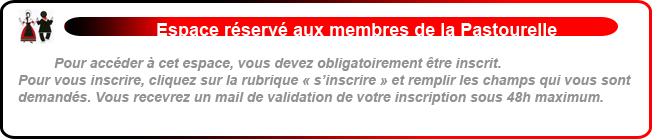
<style>
.page{position:relative;width:652px;height:139px;background:#ffffff}
.page>*{position:absolute;margin:0}
.t1{font:18px "Arial-BoldMT";color:#ffffff}
.t2{font:14px "Arial-BoldItalicMT";color:#929292}
.t3{font:11px "BerlinSansFBDemi-Bold";color:#929292}
</style>
<div class="page">
<p class="t1" style="left:157px;top:22px;width:400px;height:18px">Espace réservé aux membres de la Pastourelle</p>
<p class="t2" style="left:18px;top:57px;width:613px;height:48px"><span class="t3"> </span>Pour accéder à cet espace, vous devez obligatoirement être inscrit.<br>Pour vous inscrire, cliquez sur la rubrique « s’inscrire » et remplir les champs qui vous sont <br>demandés. Vous recevrez un mail de validation de votre inscription sous 48h maximum.</p>
</div>
